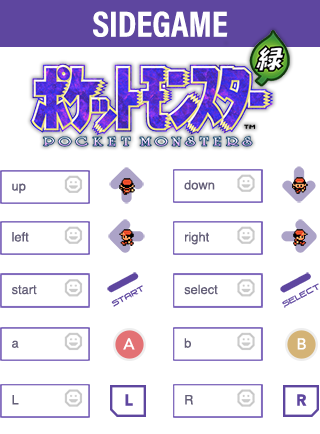
<style>
.page{position:relative;width:320px;height:434px;background:#ffffff}
.page>*{position:absolute;margin:0}
.t1{font:36.3px "AcuminProCond-Bold";color:#ffffff;text-transform:uppercase}
.t2{font:12.9px "Helvetica";color:#645f78}
.t3{font:15.8px "Avenir-Medium";color:#ffffff}
.t4{font:15.8px "Avenir-Black";color:#5e469f}
</style>
<div class="page">
<p class="t1" style="left:93px;top:11px;width:135px;height:26px">Sidegame</p>
<p class="t2" style="left:12px;top:183px;width:14px;height:11px">up</p>
<p class="t2" style="left:184px;top:180px;width:31px;height:10px">down</p>
<p class="t2" style="left:12px;top:232px;width:17px;height:10px">left</p>
<p class="t2" style="left:185px;top:232px;width:24px;height:13px">right</p>
<p class="t2" style="left:11px;top:285px;width:26px;height:10px">start</p>
<p class="t2" style="left:184px;top:284px;width:34px;height:11px">select</p>
<p class="t2" style="left:12px;top:340px;width:7px;height:8px">a</p>
<p class="t3" style="left:123px;top:338px;width:12px;height:12px">A</p>
<p class="t2" style="left:184px;top:338px;width:7px;height:10px">b</p>
<p class="t3" style="left:297px;top:338px;width:9px;height:12px">B</p>
<p class="t2" style="left:12px;top:395px;width:7px;height:10px">L</p>
<p class="t4" style="left:125px;top:394px;width:8px;height:12px">L</p>
<p class="t2" style="left:185px;top:395px;width:8px;height:10px">R</p>
<p class="t4" style="left:297px;top:394px;width:10px;height:12px">R</p>
</div>
